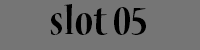
<style>
.page{position:relative;width:200px;height:50px;background:#757575}
.page>*{position:absolute;margin:0}
.t1{font:44px "NuevaStd-BoldCond";color:#000000}
</style>
<div class="page">
<p class="t1" style="left:50px;top:4px;width:96px;height:31px">slot 05</p>
</div>
